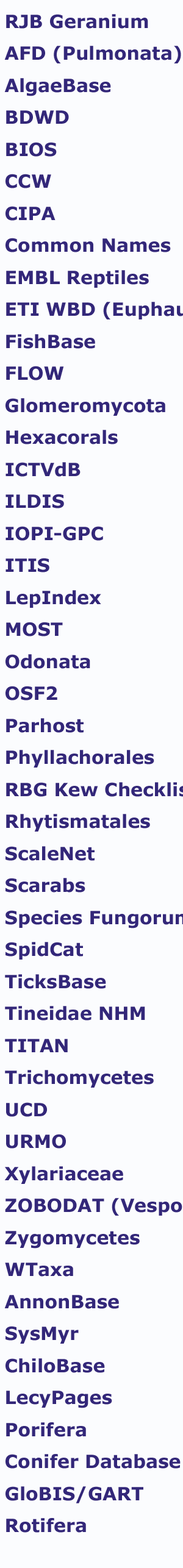
<style>
.page{position:relative;width:183px;height:1568px;background:#fbfcfe}
.page>*{position:absolute;margin:0}
.t1{font:18.3px "Verdana-Bold";color:#332779}
</style>
<div class="page">
<p class="t1" style="left:4px;top:14px;width:179px;height:1519px">RJB Geranium<br>AFD (Pulmonata)<br>AlgaeBase<br>BDWD<br>BIOS<br>CCW<br>CIPA<br>Common Names<br>EMBL Reptiles<br>ETI WBD (Euphausiacea)<br>FishBase<br>FLOW<br>Glomeromycota<br>Hexacorals<br>ICTVdB<br>ILDIS<br>IOPI-GPC<br>ITIS<br>LepIndex<br>MOST<br>Odonata<br>OSF2<br>Parhost<br>Phyllachorales<br>RBG Kew Checklist<br>Rhytismatales<br>ScaleNet<br>Scarabs<br>Species Fungorum<br>SpidCat<br>TicksBase<br>Tineidae NHM<br>TITAN<br>Trichomycetes<br>UCD<br>URMO<br>Xylariaceae<br>ZOBODAT (Vespoidea)<br>Zygomycetes<br>WTaxa<br>AnnonBase<br>SysMyr<br>ChiloBase<br>LecyPages<br>Porifera<br>Conifer Database<br>GloBIS/GART<br>Rotifera</p>
</div>
